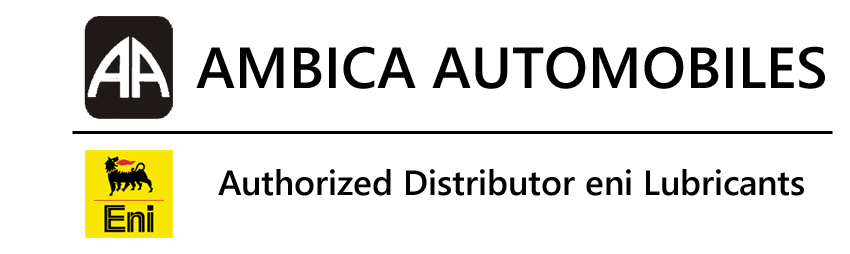
<style>
.page{position:relative;width:850px;height:254px;background:#ffffff}
.page>*{position:absolute;margin:0}
.t1{font:58px "SegoeUI-Semibold";color:#000000}
.t2{font:35px "SegoeUI-Semibold";color:#000000}
</style>
<div class="page">
<p class="t1" style="left:196px;top:46px;width:629px;height:43px">AMBICA AUTOMOBILES</p>
<p class="t2" style="left:218px;top:169px;width:586px;height:27px">Authorized Distributor eni Lubricants</p>
</div>
